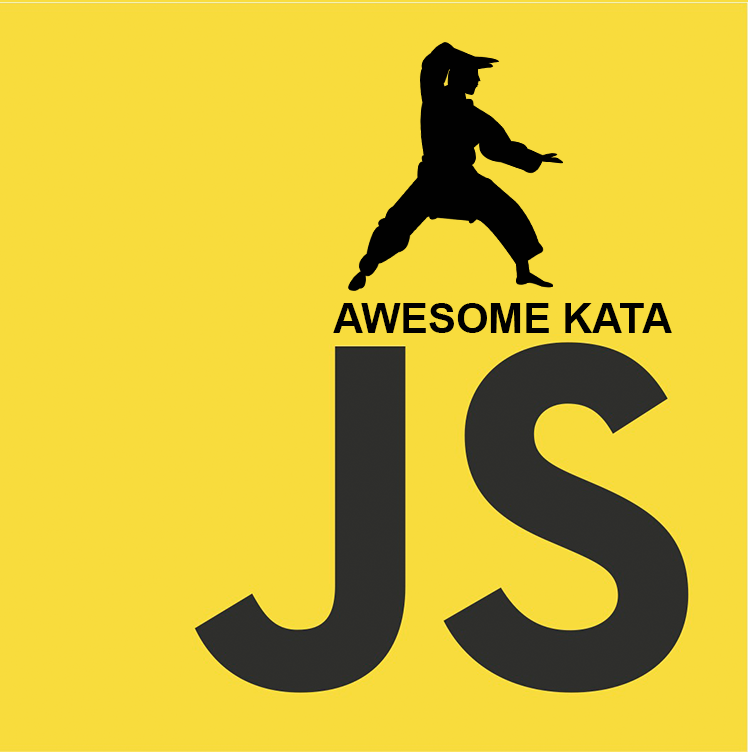
<style>
.page{position:relative;width:748px;height:752px;background:#f8dc3d}
.page>*{position:absolute;margin:0}
.t1{font:41.7px "Arial-BoldMT";color:#000000}
</style>
<div class="page">
<p class="t1" style="left:333px;top:303px;width:339px;height:30px">AWESOME KATA</p>
</div>
